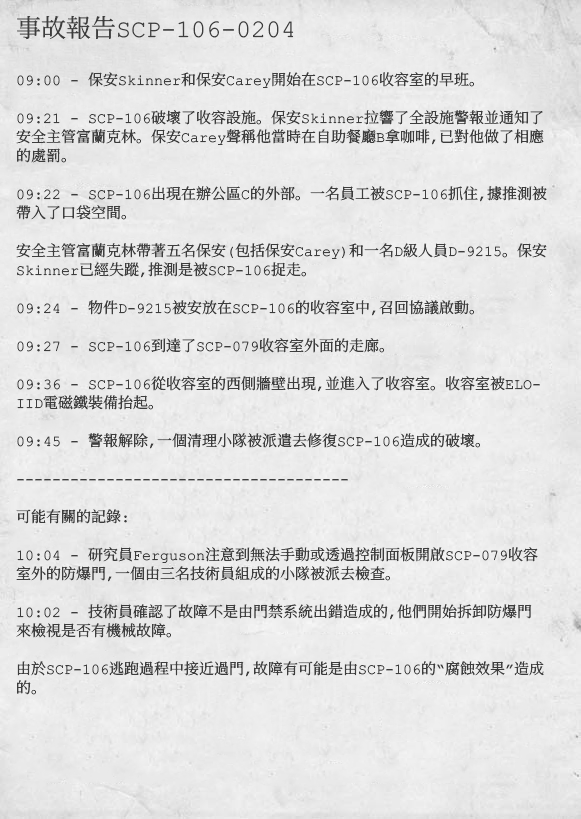
<style>
.page{position:relative;width:581px;height:819px}
.page>*{position:absolute;margin:0}
.t1{font:15px/19px "ContainmentBreach-Regular";color:#3d3d3d}
.t2{font:25px/19px "ContainmentBreach-Regular";color:#3d3d3d}
</style>
<div class="page">
<p class="t1" style="left:16px;top:15px;width:531px;height:680px"><span class="t2">事故報告SCP-106-0204<br><br><br></span>09:00 - 保安Skinner和保安Carey開始在SCP-106收容室的早班。<br><br>09:21 - SCP-106破壞了收容設施。保安Skinner拉響了全設施警報並通知了<br>安全主管富蘭克林。保安Carey聲稱他當時在自助餐廳B拿咖啡，已對他做了相應<br>的處罰。<br><br>09:22 - SCP-106出現在辦公區C的外部。一名員工被SCP-106抓住，據推測被<br>帶入了口袋空間。<br><br>安全主管富蘭克林帶著五名保安（包括保安Carey）和一名D級人員D-9215。保安<br>Skinner已經失蹤，推測是被SCP-106捉走。<br><br>09:24 - 物件D-9215被安放在SCP-106的收容室中，召回協議啟動。<br><br>09:27 - SCP-106到達了SCP-079收容室外面的走廊。<br><br>09:36 - SCP-106從收容室的西側牆壁出現，並進入了收容室。收容室被ELO-<br>IID電磁鐵裝備抬起。<br><br>09:45 - 警報解除，一個清理小隊被派遣去修復SCP-106造成的破壞。<br><br>-------------------------------------<br><br>可能有關的記錄：<br><br>10:04 - 研究員Ferguson注意到無法手動或透過控制面板開啟SCP-079收容<br>室外的防爆門，一個由三名技術員組成的小隊被派去檢查。<br><br>10：02 - 技術員確認了故障不是由門禁系統出錯造成的，他們開始拆卸防爆門<br>來檢視是否有機械故障。<br><br>由於SCP-106逃跑過程中接近過門，故障有可能是由SCP-106的“腐蝕效果”造成<br>的。</p>
</div>
